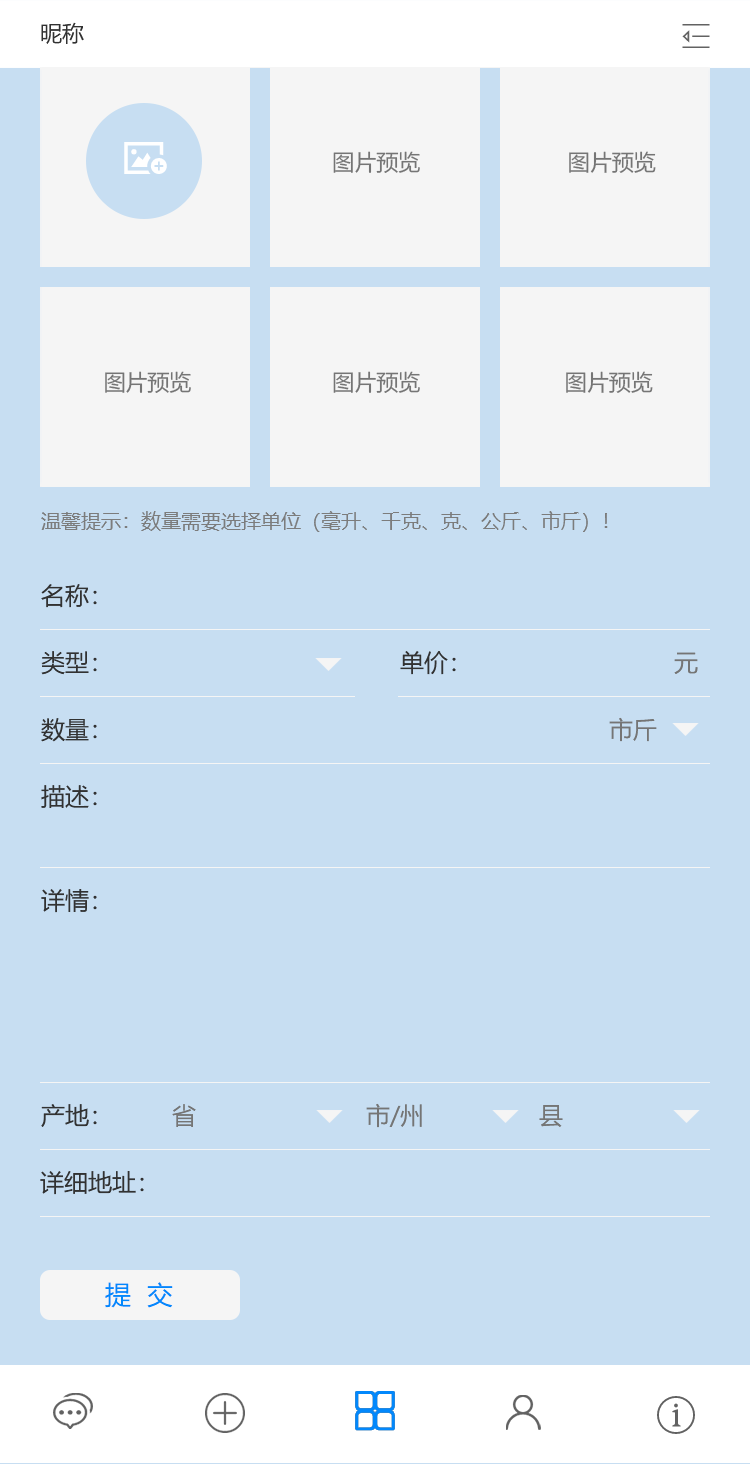
<style>
.page{position:relative;width:750px;height:1464px;background:#c7def2}
.page>*{position:absolute;margin:0}
.t1{font:22px "MicrosoftYaHei";color:#323232;text-transform:uppercase}
.t2{font:22px/220px "MicrosoftYaHei";color:#757575;text-transform:uppercase}
.t3{font:22px/48px "MicrosoftYaHei";color:#757575;text-transform:uppercase}
.t4{font:20px "MicrosoftYaHei";color:#7c7c7c;text-transform:uppercase}
.t5{font:24px/67px "MicrosoftYaHei";color:#323232;text-transform:uppercase}
.t6{font:24px/67px "MicrosoftYaHei";color:#757575;text-transform:uppercase}
.t7{font:24px "MicrosoftYaHei";color:#757575;text-transform:uppercase}
.t8{font:24px "MicrosoftYaHei";color:#323232;text-transform:uppercase}
.t9{font:26px "MicrosoftYaHei";color:#0288fc;text-transform:uppercase}
</style>
<div class="page">
<p class="t1" style="left:41px;top:22px;width:43px;height:22px">昵称</p>
<p class="t2" style="left:105px;top:151px;width:551px;height:242px"><span class="t3">      <br>              </span>图片预览             图片预览 <br>图片预览          图片预览                图片预览</p>
<p class="t4" style="left:41px;top:511px;width:567px;height:21px">温馨提示：数量需要选择单位（毫升、千克、克、公斤、市斤）！</p>
<p class="t5" style="left:41px;top:584px;width:415px;height:543px">名称：<br>类型：            单价：<br>数量：<br>描述：<br><br>详情：<br><br><br><br><br>产地：</p>
<p class="t6" style="left:609px;top:652px;width:89px;height:90px">元<br>     市斤</p>
<p class="t7" style="left:172px;top:1103px;width:391px;height:25px">省       市/州     县</p>
<p class="t8" style="left:40px;top:1171px;width:104px;height:24px">详细地址：</p>
<p class="t9" style="left:105px;top:1282px;width:68px;height:26px">提  交</p>
</div>
